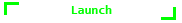
<style>
.page{position:relative;width:182px;height:23px;background:#ffffff}
.page>*{position:absolute;margin:0}
.t1{font:12.5px "Consolas-Bold";color:#00ff00}
</style>
<div class="page">
<p class="t1" style="left:71px;top:5px;width:41px;height:9px">Launch</p>
</div>
